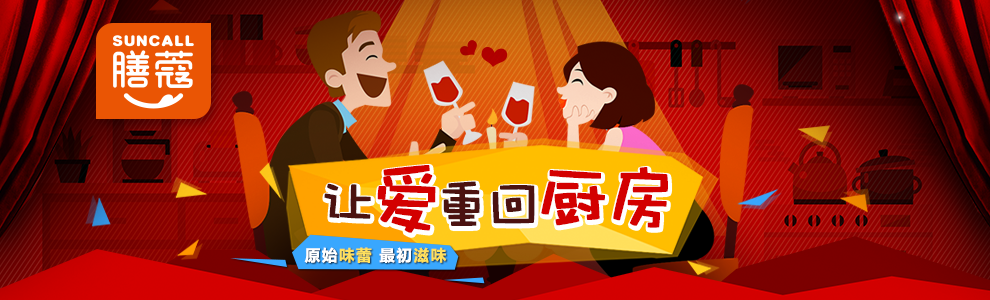
<style>
.page{position:relative;width:990px;height:300px}
.page>*{position:absolute;margin:0}
.t1{font:77.3px "DFWaWaSC-W5";color:#d30000;font-weight:bold}
.t2{font:77.3px "DFWaWaSC-W5";letter-spacing:-0.12em;color:#d30000;font-weight:bold}
.t3{font:57.3px "DFWaWaSC-W5";color:#4b1210;font-weight:bold}
.t4{font:57.3px "DFWaWaSC-W5";letter-spacing:-0.14em;color:#4b1210;font-weight:bold}
.t5{font:15.6px "MicrosoftYaHei-Bold";letter-spacing:0.1em;color:#ffffff}
.t6{font:15.6px "MicrosoftYaHei-Bold";letter-spacing:0.1em;color:#ffe05d}
.t7{font:15.6px "MicrosoftYaHei-Bold";letter-spacing:0.1em;color:#ffdf5c}
</style>
<div class="page">
<p class="t1" style="left:377px;top:165px;width:59px;height:68px">爱</p>
<p class="t2" style="left:541px;top:167px;width:127px;height:61px">厨房</p>
<p class="t3" style="left:324px;top:183px;width:47px;height:36px">让</p>
<p class="t4" style="left:442px;top:181px;width:93px;height:45px">重回</p>
<p class="t5" style="left:304px;top:247px;width:143px;height:16px">原始<span class="t6">味蕾 </span>最初<span class="t7">滋味</span></p>
</div>
